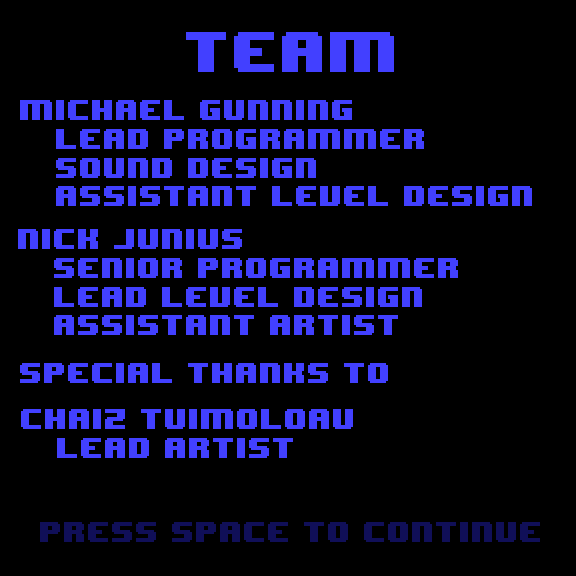
<style>
.page{position:relative;width:576px;height:576px;background:#000000}
.page>*{position:absolute;margin:0}
.t1{font:48px "8BITWONDERNominal";color:#4240ff}
.t2{font:24px "8BITWONDERNominal";color:#4240ff}
.t3{font:24px "8BITWONDERNominal";color:#100f58}
</style>
<div class="page">
<p class="t1" style="left:186px;top:32px;width:208px;height:40px">Team</p>
<p class="t2" style="left:20px;top:100px;width:512px;height:106px">Michael Gunning<br> Lead Programmer<br> Sound Design<br> Assistant Level Design</p>
<p class="t2" style="left:18px;top:229px;width:440px;height:106px">Nick Junius<br> Senior Programmer<br> Lead Level Design<br> Assistant Artist</p>
<p class="t2" style="left:20px;top:363px;width:368px;height:20px">Special Thanks to</p>
<p class="t2" style="left:21px;top:409px;width:332px;height:49px">CHaiz Tuimoloau<br> Lead Artist</p>
<p class="t3" style="left:40px;top:522px;width:500px;height:20px">Press Space to continue</p>
</div>
